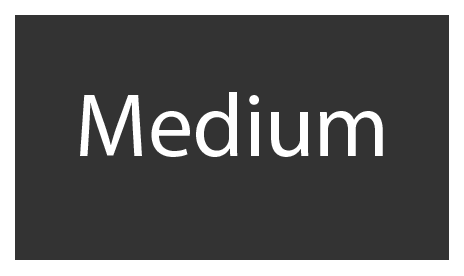
<style>
.page{position:relative;width:464px;height:276px;background:#333333}
.page>*{position:absolute;margin:0}
.t1{font:90px "MyriadPro-Regular";color:#ffffff}
</style>
<div class="page">
<p class="t1" style="left:80px;top:92px;width:303px;height:65px">Medium</p>
</div>
